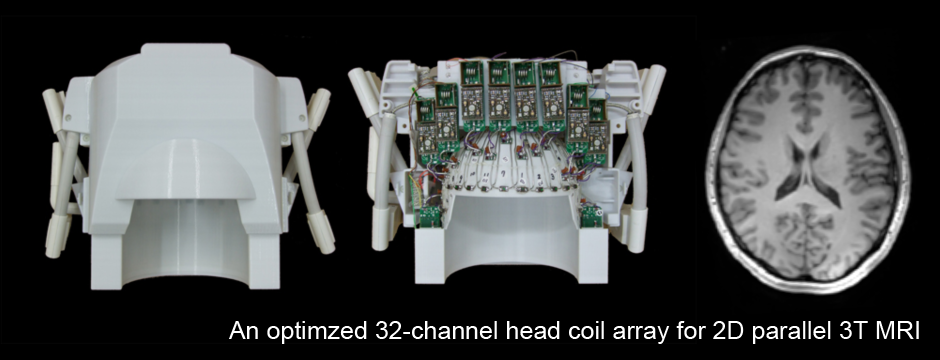
<style>
.page{position:relative;width:940px;height:360px;background:#000000}
.page>*{position:absolute;margin:0}
.t1{font:25px "ArialMT";color:#ffffff}
</style>
<div class="page">
<p class="t1" style="left:229px;top:321px;width:690px;height:23px">An optimzed 32-channel head coil array for 2D parallel 3T MRI</p>
</div>
